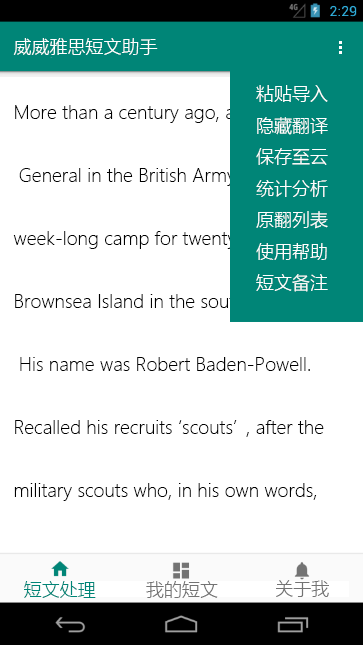
<style>
.page{position:relative;width:363px;height:645px;background:#ffffff}
.page>*{position:absolute;margin:0}
.t1{font:18px "MicrosoftYaHeiUILight";color:#ffffff}
.t2{font:18px "MicrosoftYaHeiUILight";color:#000000}
.t3{font:18px "MicrosoftYaHeiUILight";color:#008577}
.t4{font:18px "MicrosoftYaHeiUILight";color:#737373}
</style>
<div class="page">
<p class="t1" style="left:13px;top:38px;width:145px;height:17px">威威雅思短文助手</p>
<p class="t1" style="left:256px;top:85px;width:72px;height:207px">粘贴导入<br>隐藏翻译<br>保存至云<br>统计分析<br>原翻列表<br>使用帮助<br>短文备注</p>
<p class="t2" style="left:13px;top:105px;width:329px;height:396px">More than a century ago, a Lieutenant<br><br> General in the British Army organized a <br><br>week-long camp for twenty boys on <br><br>Brownsea Island in the south of England.<br><br> His name was Robert Baden-Powell. <br><br>Recalled his recruits ‘scouts’, after the <br><br>military scouts who, in his own words,</p>
<p class="t3" style="left:24px;top:581px;width:72px;height:17px">短文处理</p>
<p class="t4" style="left:146px;top:581px;width:72px;height:17px">我的短文</p>
<p class="t4" style="left:276px;top:580px;width:53px;height:17px">关于我</p>
</div>
